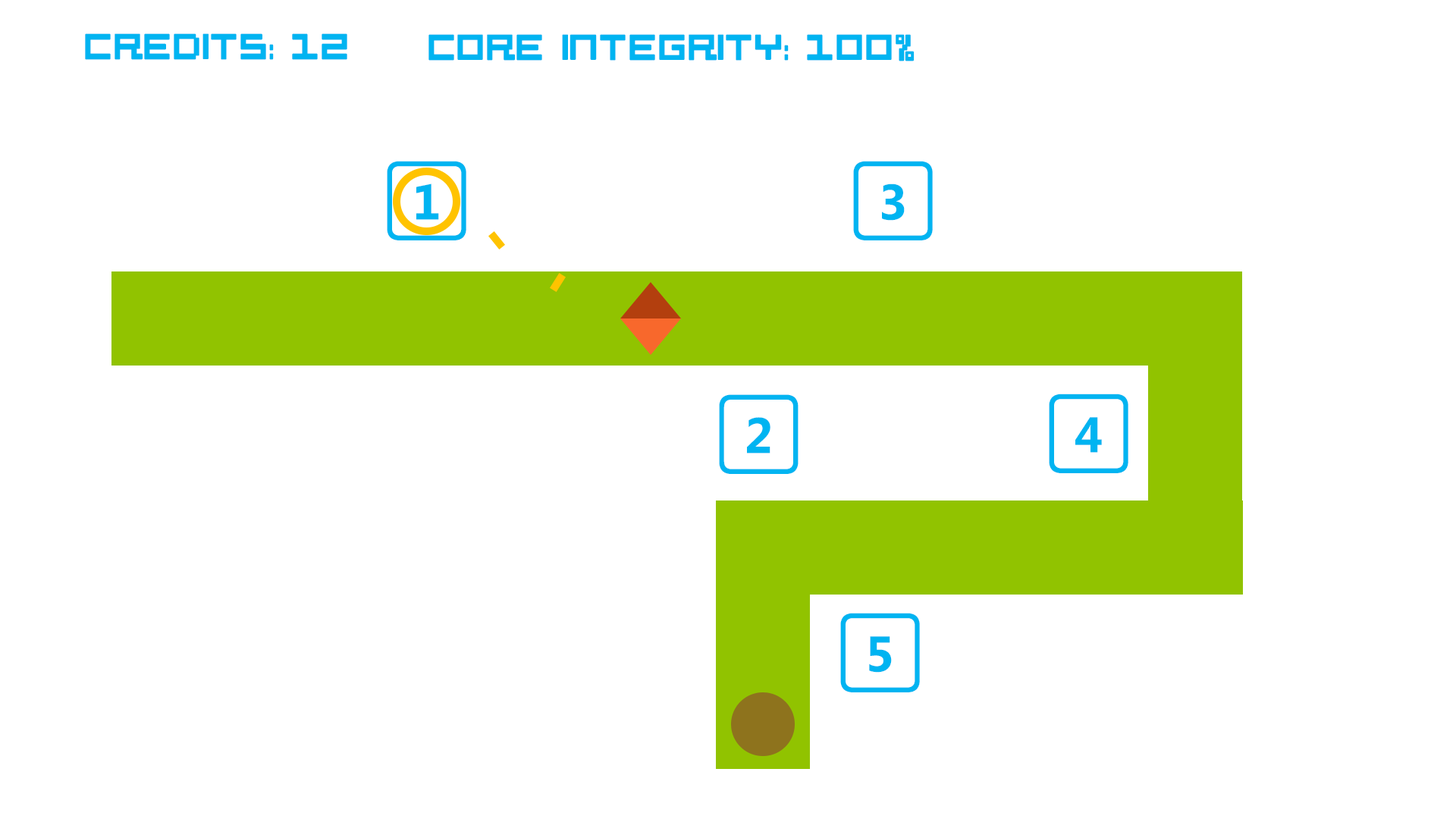
<style>
.page{position:relative;width:1456px;height:819px;background:#ffffff}
.page>*{position:absolute;margin:0}
.t1{font:36.4px "Petitinho-Normal";color:#00b4f1}
.t2{font:68.2px "SegoeKeycaps";color:#00b4f1}
.t3{font:68.4px "SegoeKeycaps";color:#00b4f1}
</style>
<div class="page">
<p class="t1" style="left:85px;top:33px;width:262px;height:27px">Credits: 12</p>
<p class="t1" style="left:428px;top:34px;width:487px;height:27px">Core integrity: 100%</p>
<p class="t2" style="left:387px;top:161px;width:79px;height:79px">1</p>
<p class="t2" style="left:853px;top:161px;width:80px;height:79px">3</p>
<p class="t3" style="left:719px;top:394px;width:80px;height:80px">2</p>
<p class="t2" style="left:1049px;top:394px;width:79px;height:79px">4</p>
<p class="t2" style="left:840px;top:613px;width:80px;height:79px">5</p>
</div>
